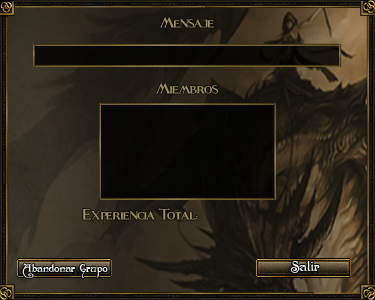
<style>
.page{position:relative;width:375px;height:300px}
.page>*{position:absolute;margin:0}
.t1{font:28.9px "Fleet-Street";color:#978b5f;scale:0.94 1}
.t2{font:28.9px "Fleet-Street";color:#9b8e61;scale:0.94 1}
.t3{font:28.9px "Fleet-Street";color:#9e9063;scale:0.94 1}
.t4{font:10.7px "Folkard";color:#ffffff}
.t5{font:14px "Folkard"}
</style>
<div class="page">
<p class="t1" style="left:160px;top:16px;width:54px;height:12px">Mensaje</p>
<p class="t2" style="left:156px;top:82px;width:63px;height:12px">Miembros</p>
<p class="t3" style="left:82px;top:208px;width:116px;height:12px">Experiencia Total:</p>
<p class="t4" style="left:22px;top:263px;width:86px;height:16px">Abandonar Grupo</p>
<p class="t5" style="left:290px;top:261px;width:30px;height:12px">Salir</p>
</div>
